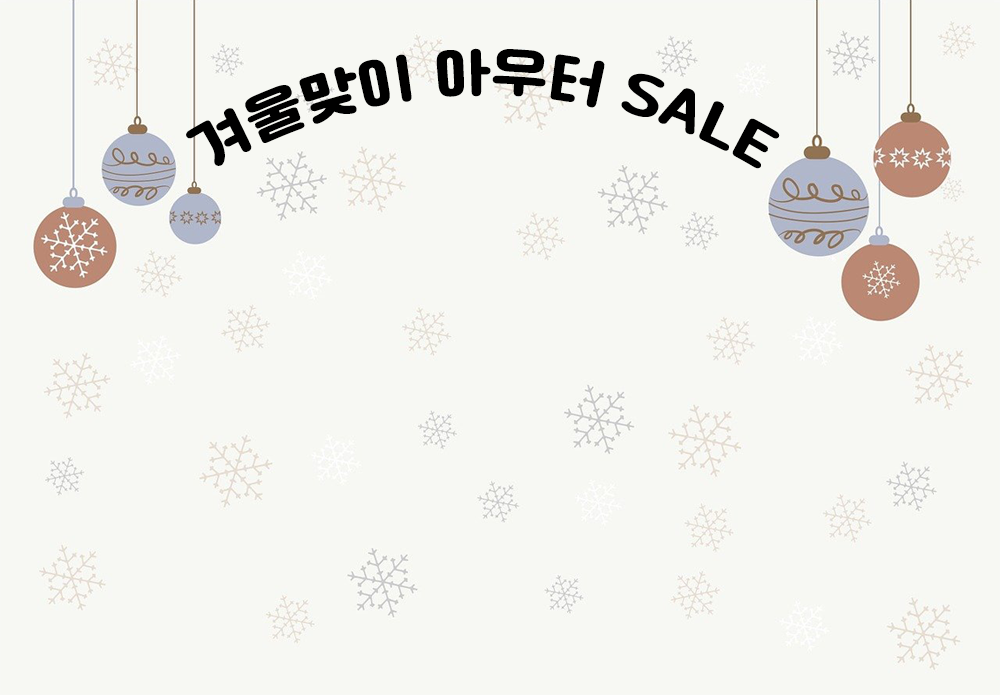
<style>
.page{position:relative;width:1000px;height:695px;background:#f7f8f3}
.page>*{position:absolute;margin:0}
.t1{font:55px "Cafe24Ssurround";color:#000000}
</style>
<div class="page">
<p class="t1" style="left:186px;top:48px;width:594px;height:121px;text-align:center">겨울맞이 아우터 SALE</p>
</div>
